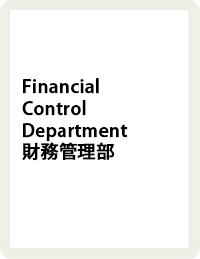
<style>
.page{position:relative;width:200px;height:259px;background:#ffffff}
.page>*{position:absolute;margin:0}
.t1{font:18px "KozGoPr6N-Medium";letter-spacing:0.005em;color:#000000;font-weight:bold}
</style>
<div class="page">
<p class="t1" style="left:22px;top:78px;width:106px;height:83px">Financial <br>Control Department<br>財務管理部</p>
</div>
